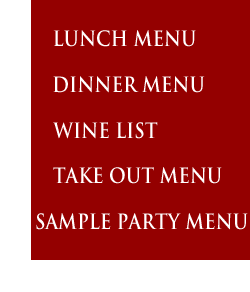
<style>
.page{position:relative;width:250px;height:292px;background:#940000}
.page>*{position:absolute;margin:0}
.t1{font:20.6px "TrajanPro-Bold";color:#ffffff;text-transform:uppercase;scale:0.88 1}
</style>
<div class="page">
<p class="t1" style="left:53px;top:30px;width:143px;height:17px">Lunch Menu</p>
<p class="t1" style="left:53px;top:76px;width:152px;height:17px">Dinner Menu</p>
<p class="t1" style="left:53px;top:122px;width:105px;height:17px">Wine List</p>
<p class="t1" style="left:53px;top:167px;width:169px;height:17px">Take Out Menu</p>
<p class="t1" style="left:36px;top:213px;width:212px;height:17px">Sample Party menu</p>
</div>
